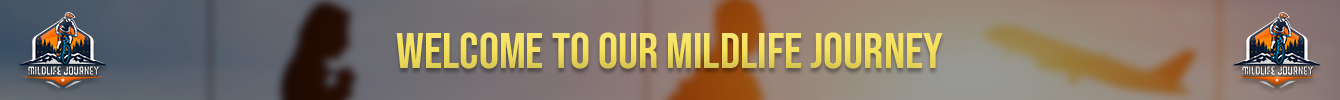
<style>
.page{position:relative;width:1340px;height:100px}
.page>*{position:absolute;margin:0}
.t1{font:50px "BebasNeue-Regular";color:#f6e15c}
</style>
<div class="page">
<p class="t1" style="left:396px;top:32px;width:547px;height:37px">welcome to our Mildlife journey</p>
</div>
